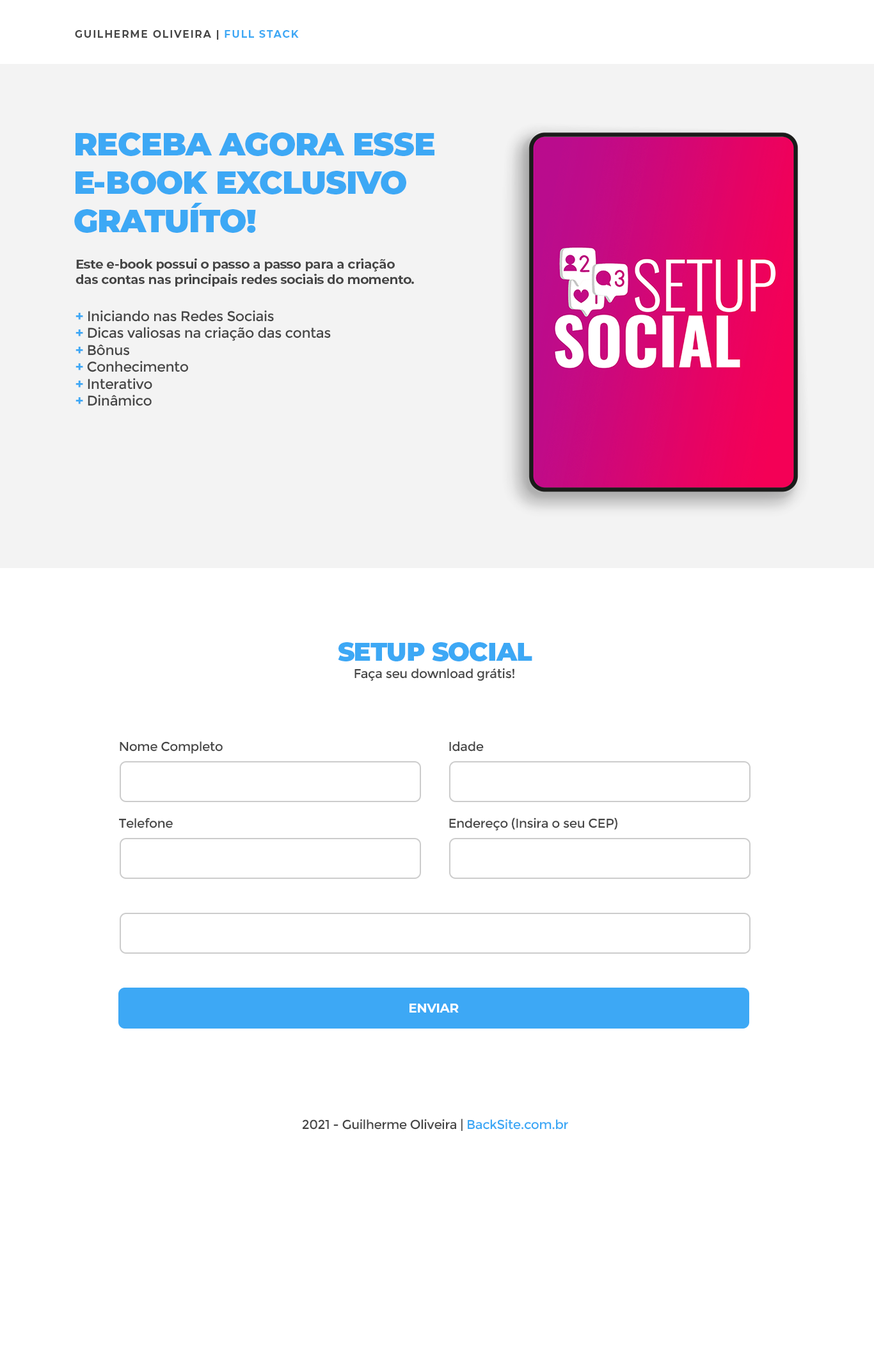
<style>
.page{position:relative;width:874px;height:1365px;background:#ffffff}
.page>*{position:absolute;margin:0}
.t1{font:10.2px "Montserrat-Bold";letter-spacing:0.1em;color:#464646}
.t2{font:10.2px "Montserrat-Bold";letter-spacing:0.1em;color:#3da8f5}
.t3{font:32px "Montserrat-Black";letter-spacing:-0.02em;color:#3da8f5}
.t4{font:12.8px "Montserrat-Bold";letter-spacing:-0.02em;color:#464646}
.t5{font:14.1px "Montserrat-Regular";letter-spacing:-0.02em;color:#464646}
.t6{font:14.1px "Montserrat-Bold";letter-spacing:-0.02em;color:#3da8f5}
.t7{font:25.6px "Montserrat-Black";letter-spacing:-0.02em;color:#3da8f5}
.t8{font:12.8px "Montserrat-Regular";letter-spacing:-0.02em;color:#464646}
.t9{font:12.8px "Montserrat-Bold";letter-spacing:-0.02em;color:#ffffff}
.t10{font:12.8px "Montserrat-Regular";letter-spacing:-0.02em;color:#3da8f5}
</style>
<div class="page">
<p class="t1" style="left:75px;top:30px;width:224px;height:10px">GUILHERME OLIVEIRA | <span class="t2">FULL STACK</span></p>
<p class="t3" style="left:74px;top:132px;width:360px;height:101px">RECEBA AGORA ESSE<br>E-BOOK EXCLUSIVO<br>GRATUÍTO!</p>
<p class="t4" style="left:75px;top:258px;width:339px;height:29px">Este e-book possui o passo a passo para a criação<br>das contas nas principais redes sociais do momento.</p>
<p class="t5" style="left:75px;top:310px;width:256px;height:96px"><span class="t6">+</span> Iniciando nas Redes Sociais<br><span class="t6">+ </span>Dicas valiosas na criação das contas<br><span class="t6">+ </span>Bônus<br><span class="t6">+ </span>Conhecimento<br><span class="t6">+ </span>Interativo<br><span class="t6">+ </span>Dinâmico</p>
<p class="t7" style="left:338px;top:642px;width:194px;height:19px">SETUP SOCIAL</p>
<p class="t8" style="left:354px;top:668px;width:160px;height:13px">Faça seu download grátis!</p>
<p class="t8" style="left:120px;top:741px;width:103px;height:12px">Nome Completo</p>
<p class="t8" style="left:449px;top:741px;width:35px;height:11px">Idade</p>
<p class="t8" style="left:119px;top:818px;width:54px;height:10px">Telefone</p>
<p class="t8" style="left:449px;top:817px;width:168px;height:14px">Endereço (Insira o seu CEP)</p>
<p class="t9" style="left:409px;top:1003px;width:50px;height:9px">ENVIAR</p>
<p class="t8" style="left:302px;top:1119px;width:266px;height:12px">2021 - Guilherme Oliveira | <span class="t10">BackSite.com.br</span></p>
</div>
